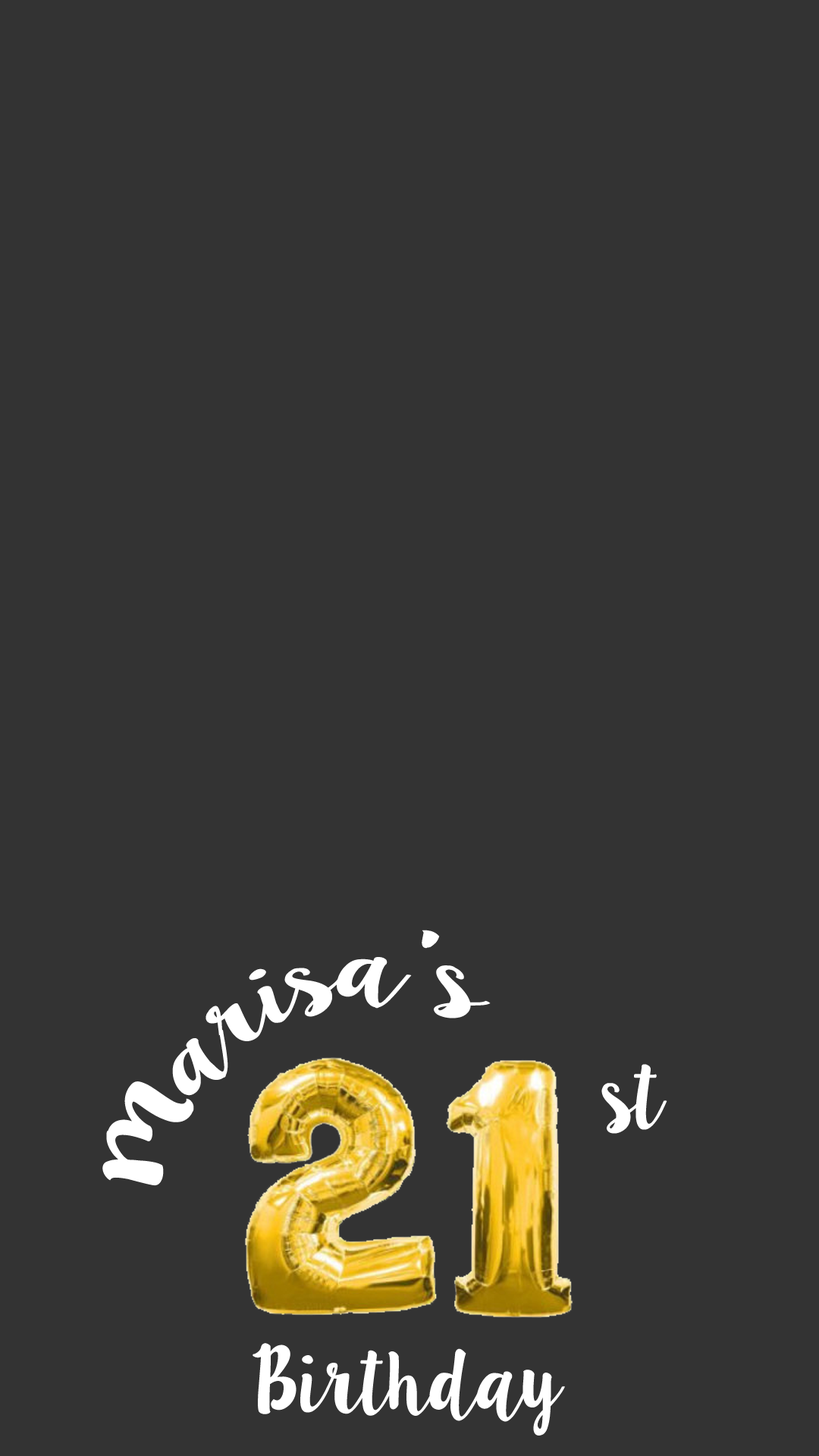
<style>
.page{position:relative;width:819px;height:1456px;background:#333333}
.page>*{position:absolute;margin:0}
.t1{font:75.8px "LillyBelle";color:#ffffff}
</style>
<div class="page">
<p class="t1" style="left:102px;top:930px;width:389px;height:256px;rotate:-28deg">Marisa’s</p>
<p class="t1" style="left:601px;top:1064px;width:66px;height:70px">st</p>
<p class="t1" style="left:253px;top:1343px;width:312px;height:93px">Birthday</p>
</div>
